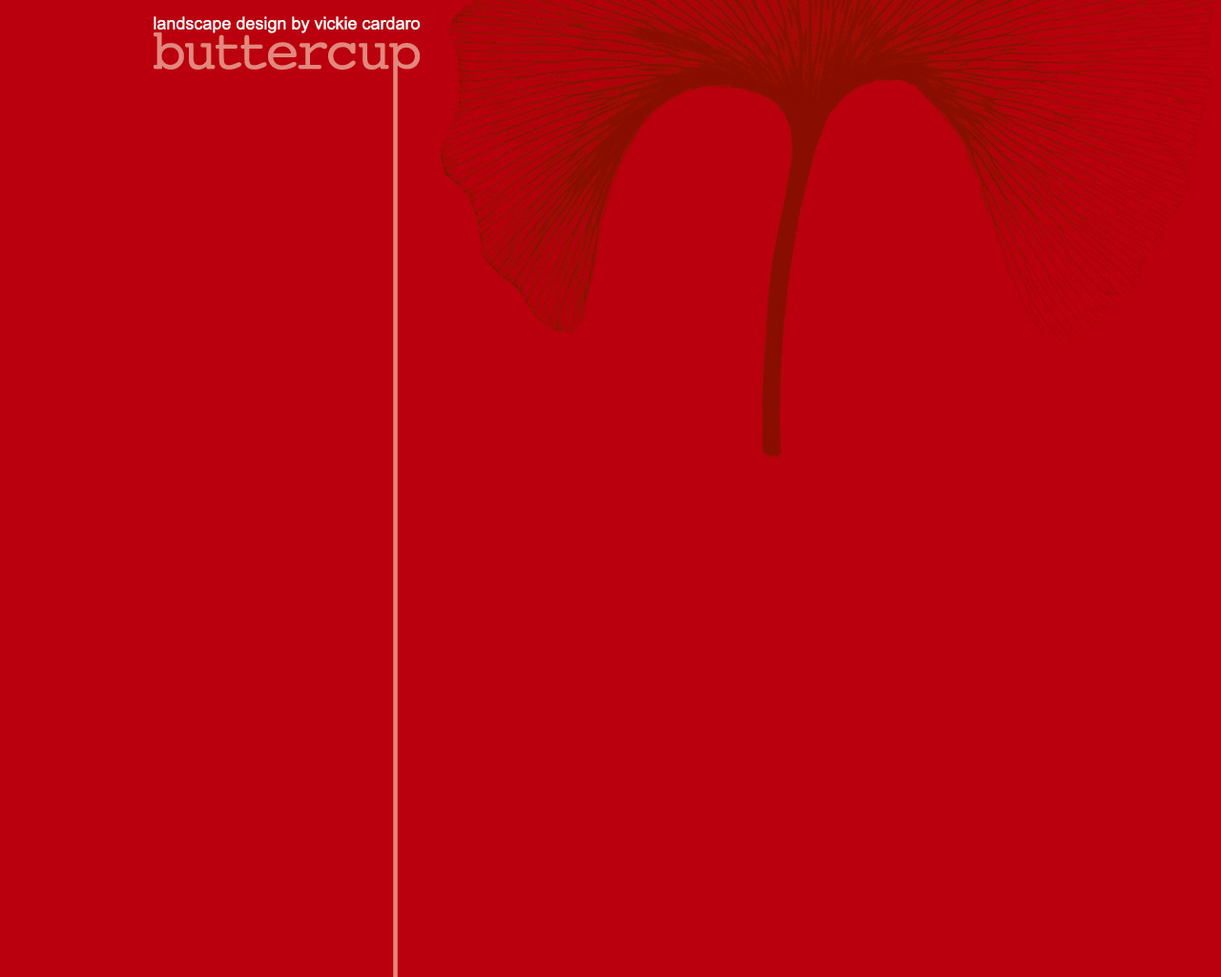
<style>
.page{position:relative;width:1221px;height:977px;background:#ba000e}
.page>*{position:absolute;margin:0}
.t1{font:17.2px "ArialMT";color:#fefafa}
</style>
<div class="page">
<p class="t1" style="left:154px;top:16px;width:266px;height:17px">landscape design by vickie cardaro</p>
</div>
